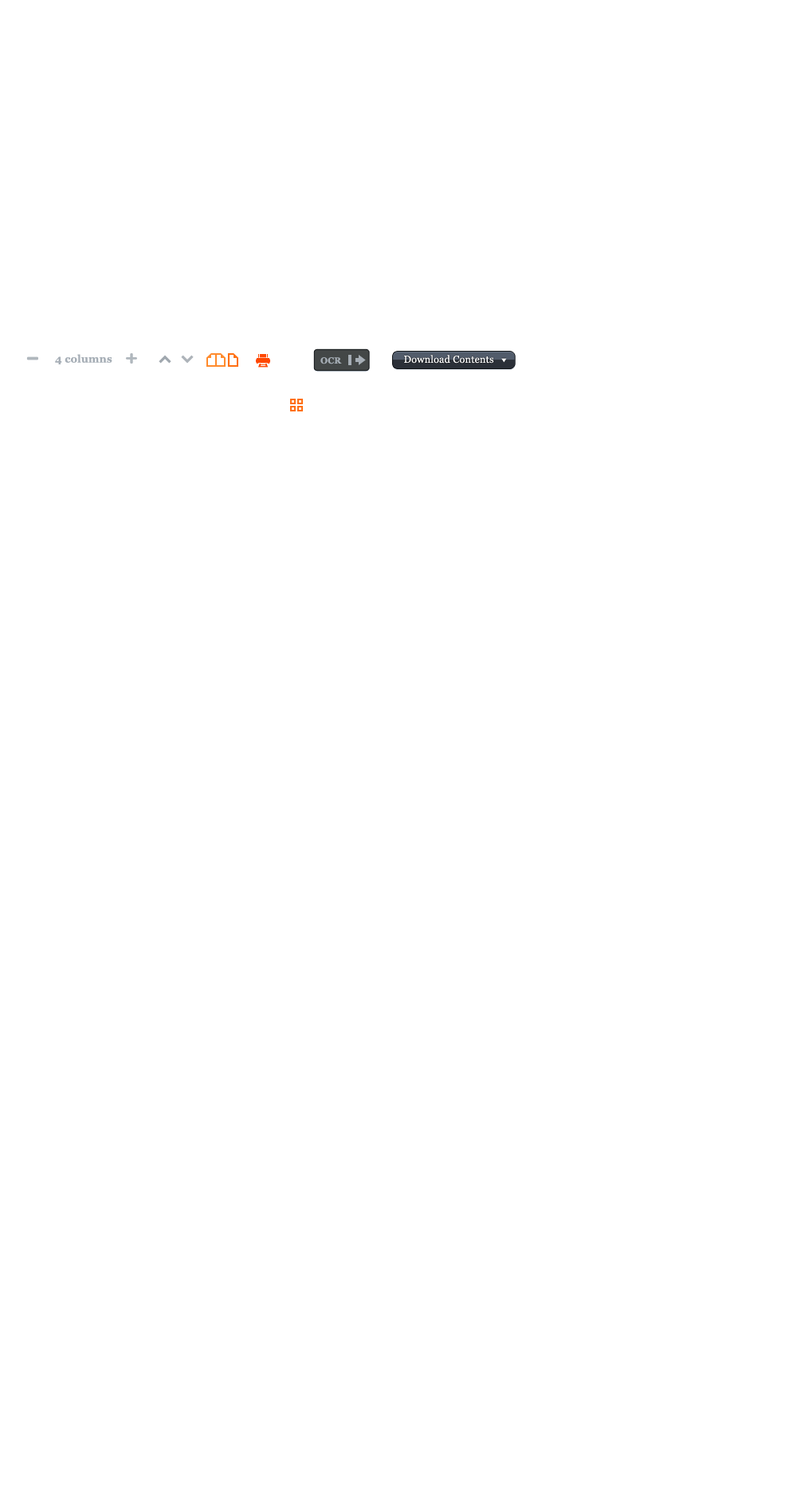
<style>
.page{position:relative;width:797px;height:1495px;background:#ffffff}
.page>*{position:absolute;margin:0}
.t1{font:10.5px "Georgia-Bold";letter-spacing:0.015em;color:#a6aeb6}
.t2{font:8.8px "Georgia-Bold";letter-spacing:0.015em;color:#a6aeb6}
.t3{font:10px "Georgia";letter-spacing:0.015em;color:#ffffff}
</style>
<div class="page">
<p class="t1" style="left:55px;top:354px;width:57px;height:10px">4 columns</p>
<p class="t2" style="left:321px;top:357px;width:21px;height:7px">OCR</p>
<p class="t3" style="left:404px;top:355px;width:90px;height:9px">Download Contents</p>
</div>
